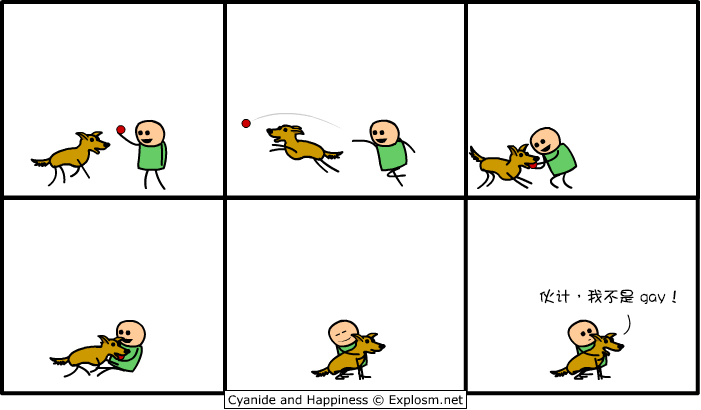
<style>
.page{position:relative;width:701px;height:410px;background:#ffffff}
.page>*{position:absolute;margin:0}
.t1{font:16px "DFGirl";color:#000000}
</style>
<div class="page">
<p class="t1" style="left:539px;top:289px;width:137px;height:15px">伙计，我不是 gay！</p>
</div>
